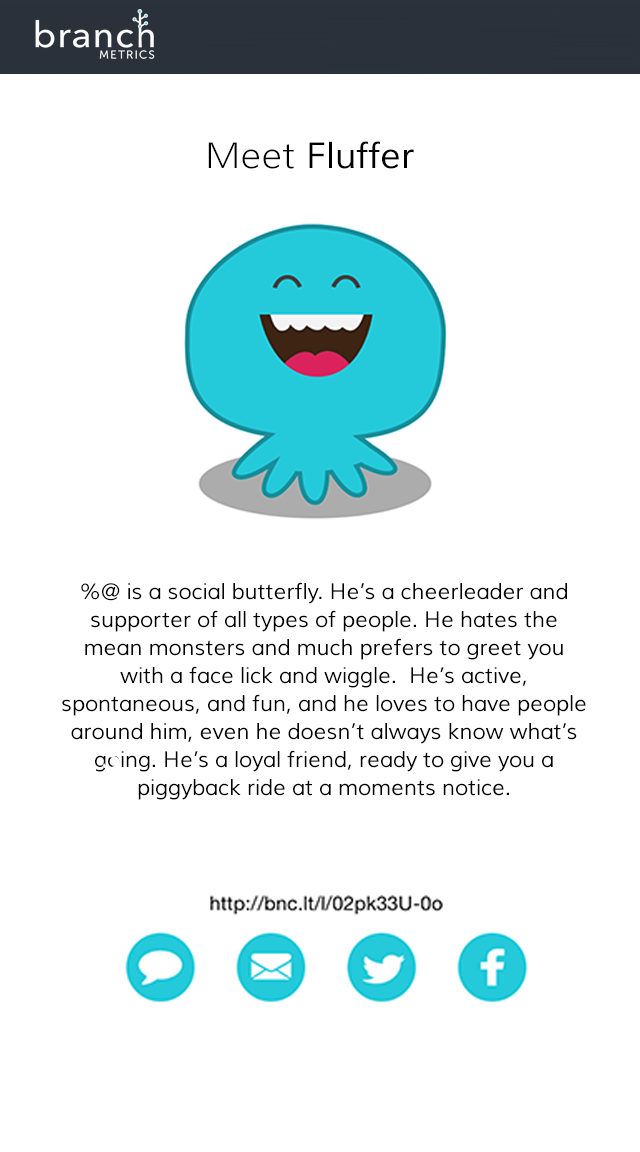
<style>
.page{position:relative;width:640px;height:1152px;background:#ffffff}
.page>*{position:absolute;margin:0}
.t1{font:36px "Muli";color:#000000}
.t2{font:36px "Muli-Light";color:#000000}
.t3{font:22px/28px "Muli";color:#000000}
</style>
<div class="page">
<p class="t1" style="left:208px;top:141px;width:206px;height:28px"><span class="t2">Meet </span>Fluffer</p>
<p class="t3" style="left:62px;top:582px;width:524px;height:218px;text-align:center">%@ is a social butterfly. He’s a cheerleader and supporter of all types of people. He hates the mean monsters and much prefers to greet you with a face lick and wiggle.  He’s active, spontaneous, and fun, and he loves to have people around him, even he doesn’t always know what’s going. He’s a loyal friend, ready to give you a piggyback ride at a moments notice.</p>
</div>
